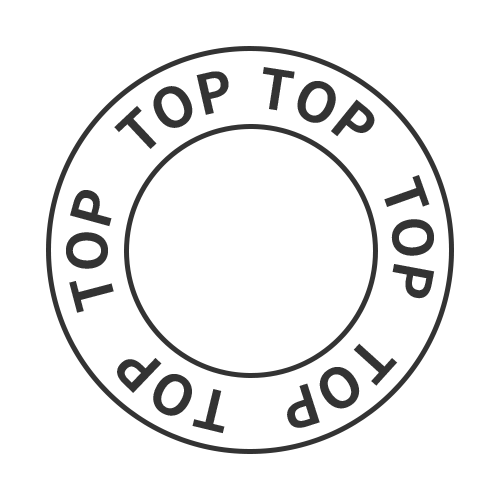
<style>
.page{position:relative;width:500px;height:500px;background:#ffffff}
.page>*{position:absolute;margin:0}
.t1{font:55px/24px "NotoSansKR-Bold";letter-spacing:-0.025em;color:#333333}
</style>
<div class="page">
<p class="t1" style="left:66px;top:67px;width:369px;height:367px">TOP    TOP    TOP    TOP    TOP    TOP</p>
</div>
